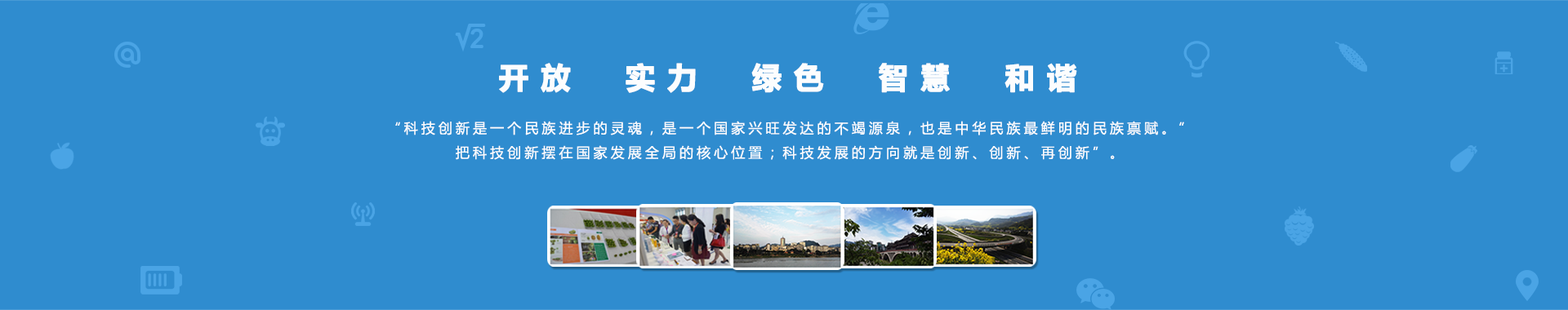
<style>
.page{position:relative;width:1568px;height:310px;background:#2f8ccf}
.page>*{position:absolute;margin:0}
.t1{font:29.4px "MicrosoftYaHei-Bold";letter-spacing:0.4em;color:#fcfdfe;font-weight:bold}
.t2{font:13.9px/24.5px "MicrosoftYaHei";letter-spacing:0.24em;color:#fcfdfe}
</style>
<div class="page">
<p class="t1" style="left:499px;top:63px;width:578px;height:30px">开放  实力  绿色  智慧  和谐</p>
<p class="t2" style="left:395px;top:121px;width:789px;height:39px;text-align:center">“科技创新是一个民族进步的灵魂，是一个国家兴旺发达的不竭源泉，也是中华民族最鲜明的民族禀赋。”<br>把科技创新摆在国家发展全局的核心位置；科技发展的方向就是创新、创新、再创新”。</p>
</div>
